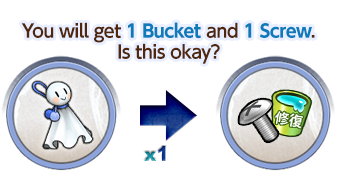
<style>
.page{position:relative;width:347px;height:177px;background:#ffffff}
.page>*{position:absolute;margin:0}
.t1{font:18px/21px "UDShinGoPro-DeBold";letter-spacing:-0.04em;color:#50260d}
.t2{font:18px/21px "UDShinGoPro-Bold";letter-spacing:-0.04em;color:#0d7bba}
</style>
<div class="page">
<p class="t1" style="left:21px;top:22px;width:294px;height:42px;text-align:center">You will get <span class="t2">1 Bucket</span> and <span class="t2">1 Screw</span>.<br>Is this okay?</p>
</div>
